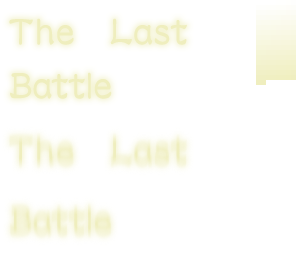
<style>
.page{position:relative;width:296px;height:256px;background:#ffffff}
.page>*{position:absolute;margin:0}
.t1{font:48.4px/54px "DFLeiShoStd-W5";letter-spacing:-0.025em;color:#efeebe;scale:0.82 1}
.t2{font:48.4px/54px "DFLeiShoStd-W5";letter-spacing:0.05em;color:#efeebe;scale:0.82 1}
.t3{font:48.4px/54px "DFLeiShoStd-W5";letter-spacing:0.025em;color:#efeebe;scale:0.82 1}
.t4{font:48.4px/54px "DFLeiShoStd-W5";color:#efeebe;scale:0.82 1}
</style>
<div class="page">
<p class="t1" style="left:9px;top:18px;width:178px;height:81px"><span class="t2">T</span><span class="t3">h</span><span class="t2">e   </span><span class="t4">Last<br></span>Battle</p>
</div>
